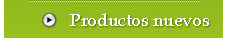
<style>
.page{position:relative;width:227px;height:38px}
.page>*{position:absolute;margin:0}
.t1{font:18px "BookAntiqua";letter-spacing:-0.02em;color:#fcfcfc}
</style>
<div class="page">
<p class="t1" style="left:70px;top:13px;width:139px;height:13px">Productos nuevos</p>
</div>
